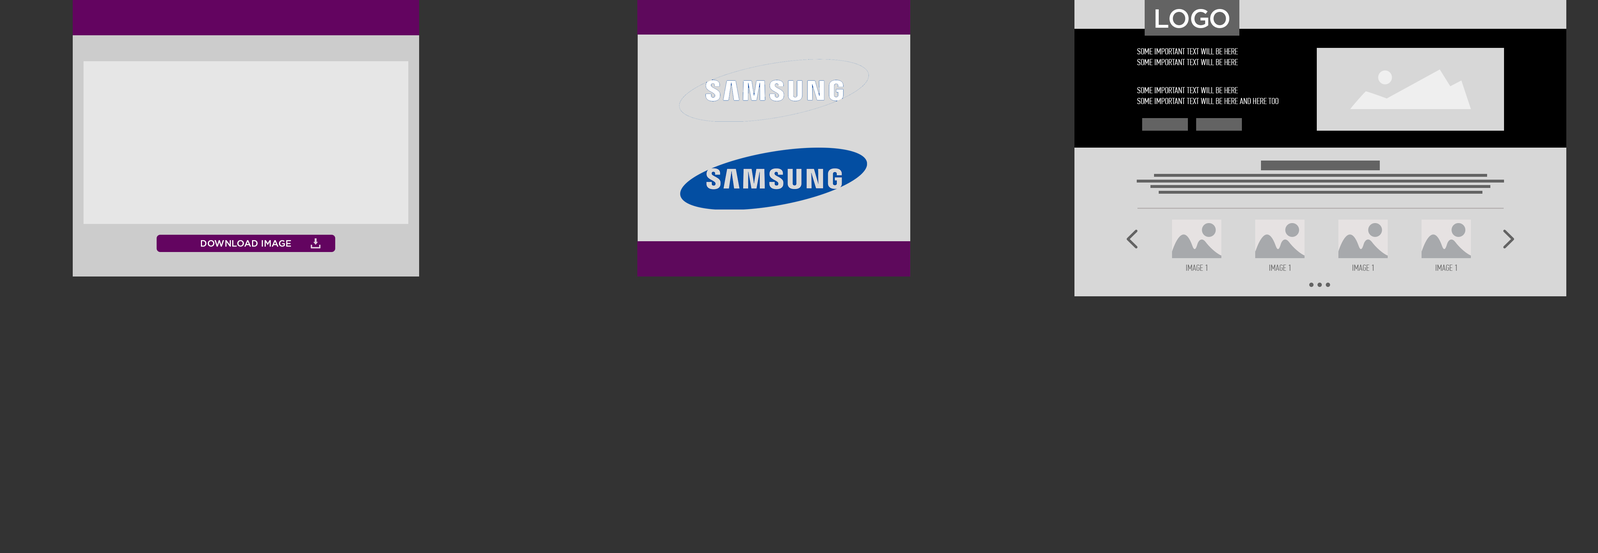
<style>
.page{position:relative;width:1598px;height:553px;background:#333333}
.page>*{position:absolute;margin:0}
.t1{font:26px "GothamPro-Medium";color:#fefefe;text-transform:uppercase}
.t2{font:9px/10.8px "PFDinTextCompPro-Light";color:#fefefe;text-transform:uppercase}
.t3{font:9px "GothamPro-Medium";color:#ffffff;text-transform:uppercase}
.t4{font:9px "PFDinTextCompPro-Light";color:#636363;text-transform:uppercase}
</style>
<div class="page">
<p class="t1" style="left:1155px;top:9px;width:74px;height:19px">logo</p>
<p class="t2" style="left:1137px;top:48px;width:101px;height:17px">Some important text will be here<br>Some important text will be here</p>
<p class="t2" style="left:1137px;top:87px;width:141px;height:17px">Some important text will be here<br>Some important text will be here and here too</p>
<p class="t3" style="left:201px;top:240px;width:90px;height:7px">download image</p>
<p class="t4" style="left:1186px;top:265px;width:21px;height:6px">image 1</p>
<p class="t4" style="left:1269px;top:265px;width:21px;height:6px">image 1</p>
<p class="t4" style="left:1352px;top:265px;width:21px;height:6px">image 1</p>
<p class="t4" style="left:1435px;top:265px;width:22px;height:6px">image 1</p>
</div>
